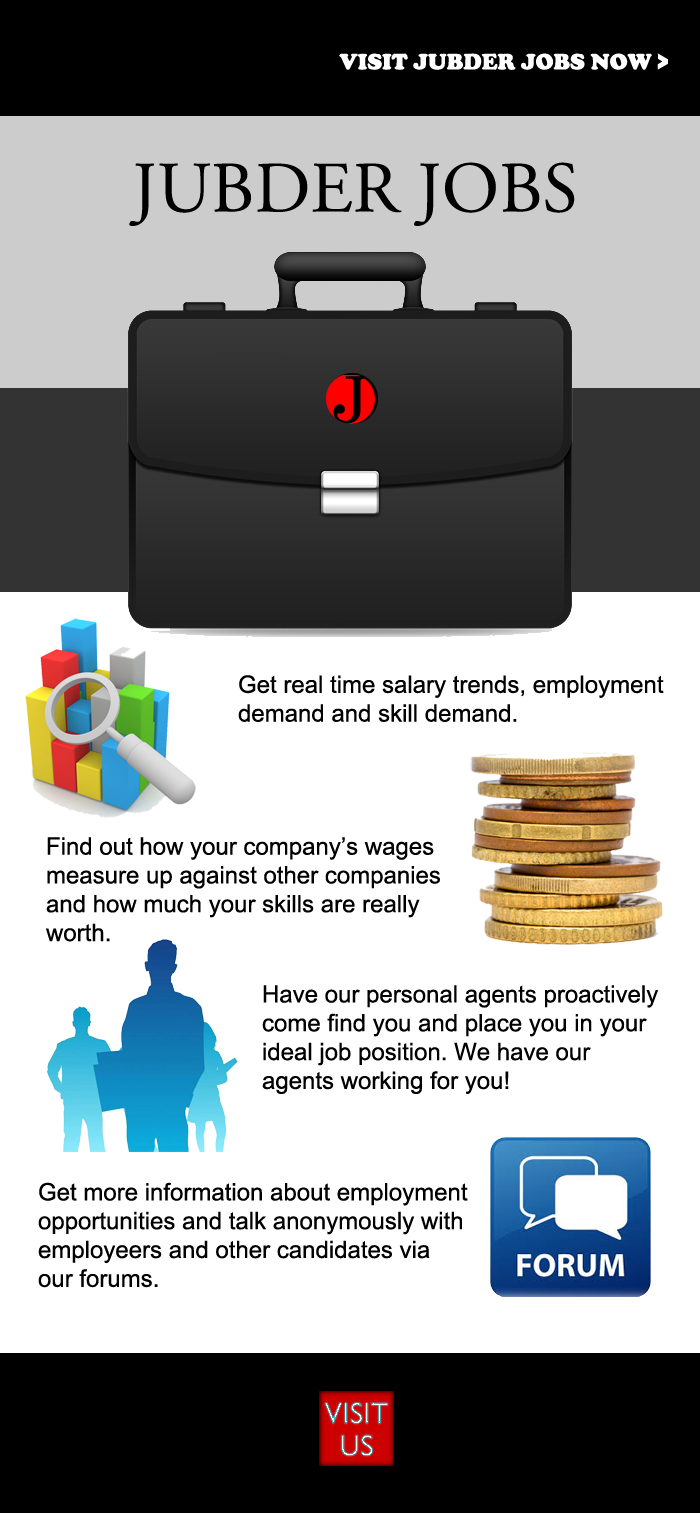
<style>
.page{position:relative;width:700px;height:1513px;background:#ffffff}
.page>*{position:absolute;margin:0}
.t1{font:23px "CooperBlack";color:#ffffff}
.t2{font:72px "AGaramondPro-Regular";color:#000000}
.t3{font:24px "ArialMT";color:#000000}
</style>
<div class="page">
<p class="t1" style="left:339px;top:53px;width:329px;height:17px">VISIT JUBDER JOBS NOW &gt;</p>
<p class="t2" style="left:129px;top:162px;width:446px;height:64px">JUBDER JOBS</p>
<p class="t3" style="left:238px;top:675px;width:426px;height:47px">Get real time salary trends, employment demand and skill demand.</p>
<p class="t3" style="left:46px;top:837px;width:394px;height:105px">Find out how your company’s wages measure up against other companies and how much your skills are really worth.</p>
<p class="t3" style="left:262px;top:985px;width:397px;height:109px">Have our personal agents proactively come find you and place you in your ideal job position. We have our agents working for you!</p>
<p class="t3" style="left:38px;top:1182px;width:430px;height:106px">Get more information about employment opportunities and talk anonymously with employeers and other candidates via our forums.</p>
</div>
